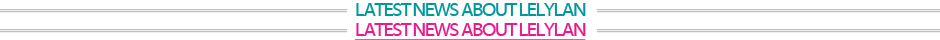
<style>
.page{position:relative;width:940px;height:40px;background:#ffffff}
.page>*{position:absolute;margin:0}
.t1{font:20px "MyriadWebPro";letter-spacing:-0.075em;color:#00979d}
.t2{font:20px "MyriadWebPro";letter-spacing:-0.075em;color:#ea198f;text-decoration:underline}
</style>
<div class="page">
<p class="t1" style="left:356px;top:3px;width:230px;height:13px">LATEST NEWS ABOUT LELYLAN</p>
<p class="t2" style="left:355px;top:23px;width:231px;height:18px">LATEST NEWS ABOUT LELYLAN</p>
</div>
